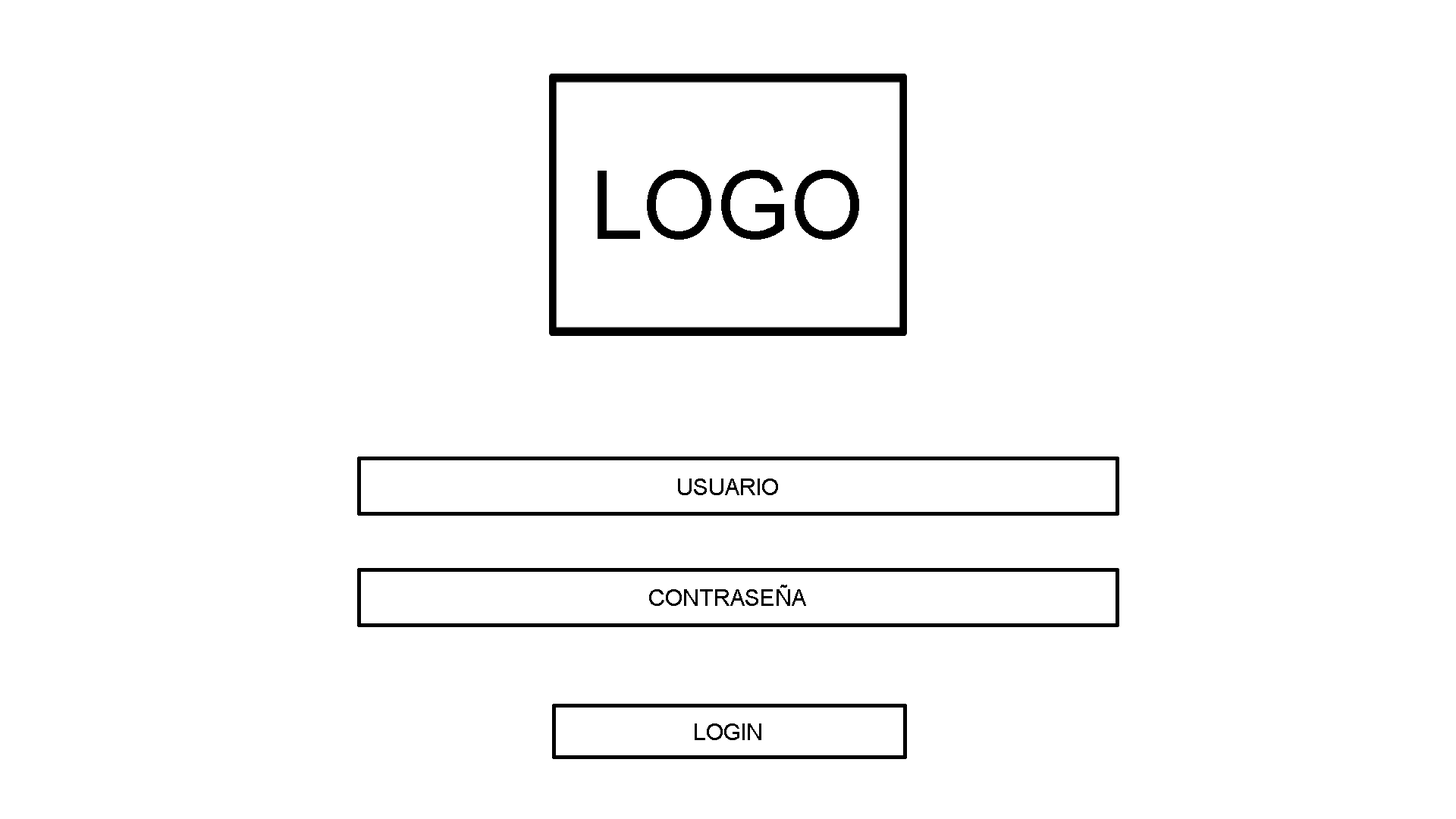
<style>
.page{position:relative;width:1456px;height:819px;background:#ffffff}
.page>*{position:absolute;margin:0}
.t1{font:94.9px "ArialMT";color:#000000}
.t2{font:22.7px "ArialMT";color:#000000}
</style>
<div class="page">
<p class="t1" style="left:598px;top:170px;width:261px;height:70px">LOGO</p>
<p class="t2" style="left:678px;top:479px;width:100px;height:16px">USUARIO</p>
<p class="t2" style="left:649px;top:585px;width:157px;height:21px">CONTRASEÑA</p>
<p class="t2" style="left:695px;top:723px;width:66px;height:17px">LOGIN</p>
</div>
